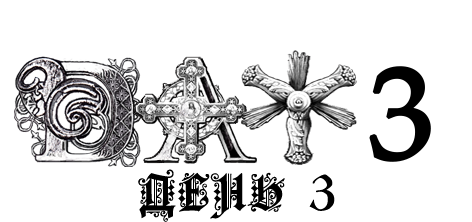
<style>
.page{position:relative;width:472px;height:222px;background:#ffffff}
.page>*{position:absolute;margin:0}
.t1{font:48px "FortunaGothicFlorishC";letter-spacing:0.05em;color:#000000}
</style>
<div class="page">
<p class="t1" style="left:138px;top:169px;width:197px;height:53px">ДЕНЬ 3</p>
</div>
